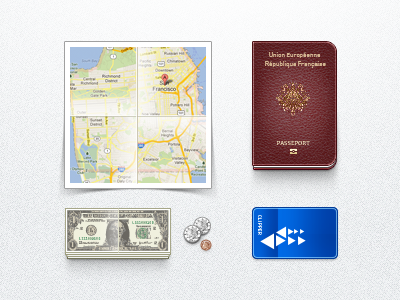
<style>
.page{position:relative;width:400px;height:300px}
.page>*{position:absolute;margin:0}
.t1{font:7px "Blender-Medium";color:#d2b490}
.t2{font:6px "Kefa-Regular"}
.t3{font:6px "Blender-Heavy";color:#ffffff}
</style>
<div class="page">
<p class="t1" style="left:269px;top:52px;width:52px;height:7px">Union Européenne</p>
<p class="t1" style="left:265px;top:61px;width:61px;height:7px">République Française</p>
<p class="t2" style="left:276px;top:140px;width:34px;height:5px">PASSEPORT</p>
<p class="t3" style="left:258px;top:215px;width:4px;height:20px;rotate:90deg">CLIPPER</p>
</div>
